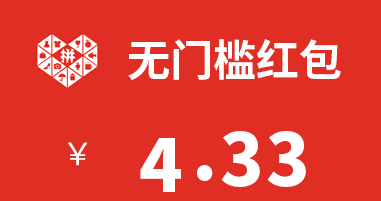
<style>
.page{position:relative;width:381px;height:201px;background:#e12e24}
.page>*{position:absolute;margin:0}
.t1{font:43px "SourceHanSansCN-Bold";color:#ffffff;text-transform:uppercase}
.t2{font:31px "SourceHanSansCN-Normal";color:#ffffff;text-transform:uppercase}
.t3{font:72px "SourceHanSansCN-Heavy";color:#ffffff;text-transform:uppercase}
</style>
<div class="page">
<p class="t1" style="left:128px;top:39px;width:213px;height:41px">无门槛红包</p>
<p class="t2" style="left:68px;top:142px;width:20px;height:24px">￥</p>
<p class="t3" style="left:197px;top:165px;width:16px;height:16px">.</p>
</div>
